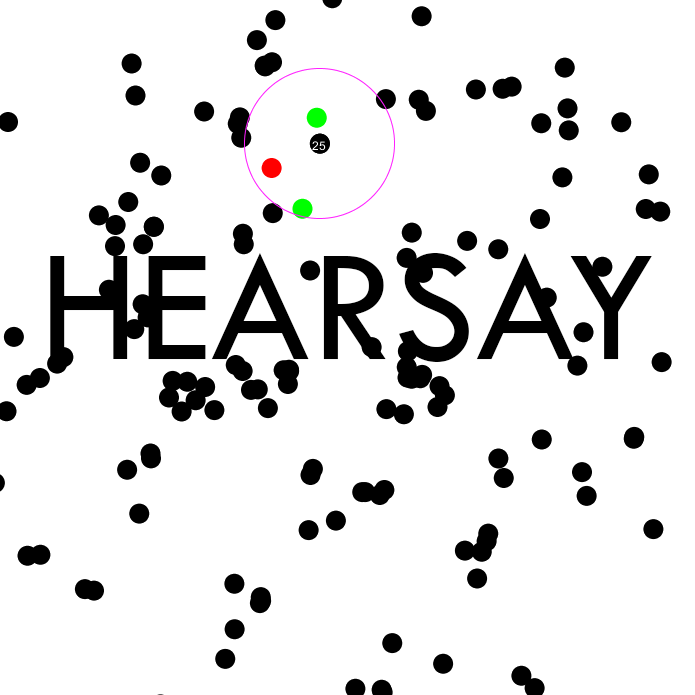
<style>
.page{position:relative;width:695px;height:695px;background:#ffffff}
.page>*{position:absolute;margin:0}
.t1{font:165px "TwCenMT-Regular";color:#000000}
</style>
<div class="page">
<p class="t1" style="left:50px;top:253px;width:602px;height:109px">HEARSAY</p>
</div>
